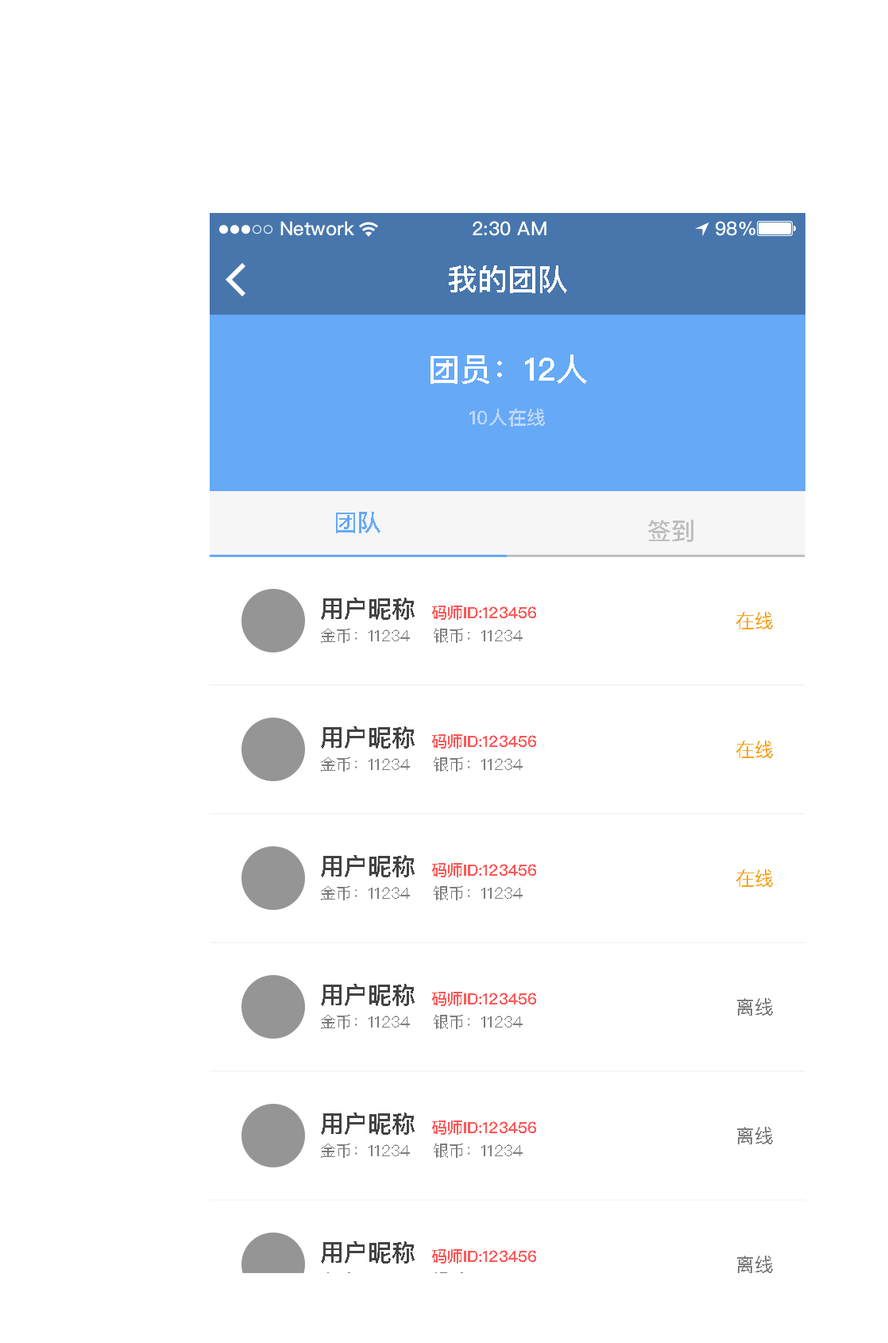
<style>
.page{position:relative;width:888px;height:1343px;background:#ffffff}
.page>*{position:absolute;margin:0}
.t1{font:30.2px "PingFangSC-Medium";color:#ffffff;text-transform:uppercase}
.t2{font:31.8px "PingFangSC-Medium";color:#ffffff;text-transform:uppercase}
.t3{font:19.1px "PingFangSC-Medium";color:#bdd7fb;text-transform:uppercase}
.t4{font:23.8px "PingFangSC-Medium";color:#66a9f7;text-transform:uppercase}
.t5{font:23.8px "PingFangSC-Medium";color:#bfbfbf;text-transform:uppercase}
.t6{font:23.8px "PingFangSC-Medium";color:#434343;text-transform:uppercase}
.t7{font:15.9px "PingFangSC-Medium";color:#ff5858;text-transform:uppercase}
.t8{font:19.1px "PingFangSC-Regular";color:#f6a623;text-transform:uppercase}
.t9{font:15.9px "PingFangSC-Regular";color:#7d7d7d;text-transform:uppercase}
.t10{font:19.1px "PingFangSC-Regular";color:#7d7d7d;text-transform:uppercase}
</style>
<div class="page">
<p class="t1" style="left:449px;top:265px;width:118px;height:28px">我的团队</p>
<p class="t2" style="left:431px;top:354px;width:156px;height:30px">团员：12人</p>
<p class="t3" style="left:470px;top:408px;width:75px;height:19px">10人在线</p>
<p class="t4" style="left:336px;top:512px;width:45px;height:21px">团队</p>
<p class="t5" style="left:648px;top:520px;width:46px;height:22px">签到</p>
<p class="t6" style="left:321px;top:597px;width:94px;height:23px">用户昵称</p>
<p class="t7" style="left:432px;top:605px;width:104px;height:15px">码师ID:123456</p>
<p class="t8" style="left:736px;top:612px;width:37px;height:17px">在线</p>
<p class="t9" style="left:321px;top:628px;width:89px;height:15px">金币：11234</p>
<p class="t9" style="left:434px;top:628px;width:89px;height:15px">银币：11234</p>
<p class="t6" style="left:321px;top:726px;width:94px;height:22px">用户昵称</p>
<p class="t7" style="left:432px;top:734px;width:104px;height:14px">码师ID:123456</p>
<p class="t8" style="left:736px;top:740px;width:37px;height:18px">在线</p>
<p class="t9" style="left:321px;top:757px;width:89px;height:14px">金币：11234</p>
<p class="t9" style="left:434px;top:757px;width:89px;height:14px">银币：11234</p>
<p class="t6" style="left:321px;top:855px;width:94px;height:22px">用户昵称</p>
<p class="t7" style="left:432px;top:863px;width:104px;height:14px">码师ID:123456</p>
<p class="t8" style="left:736px;top:869px;width:37px;height:18px">在线</p>
<p class="t9" style="left:321px;top:886px;width:89px;height:14px">金币：11234</p>
<p class="t9" style="left:434px;top:886px;width:89px;height:14px">银币：11234</p>
<p class="t6" style="left:321px;top:983px;width:94px;height:23px">用户昵称</p>
<p class="t7" style="left:432px;top:991px;width:104px;height:15px">码师ID:123456</p>
<p class="t10" style="left:737px;top:998px;width:36px;height:17px">离线</p>
<p class="t9" style="left:321px;top:1014px;width:89px;height:15px">金币：11234</p>
<p class="t9" style="left:434px;top:1014px;width:89px;height:15px">银币：11234</p>
<p class="t6" style="left:321px;top:1112px;width:94px;height:22px">用户昵称</p>
<p class="t7" style="left:432px;top:1120px;width:104px;height:14px">码师ID:123456</p>
<p class="t10" style="left:737px;top:1126px;width:36px;height:18px">离线</p>
<p class="t9" style="left:321px;top:1143px;width:89px;height:14px">金币：11234</p>
<p class="t9" style="left:434px;top:1143px;width:89px;height:14px">银币：11234</p>
<p class="t6" style="left:321px;top:1241px;width:94px;height:22px">用户昵称</p>
<p class="t7" style="left:432px;top:1249px;width:104px;height:14px">码师ID:123456</p>
<p class="t10" style="left:737px;top:1255px;width:36px;height:18px">离线</p>
</div>
